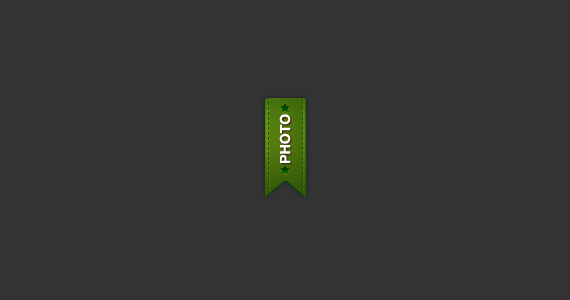
<style>
.page{position:relative;width:570px;height:300px;background:#333333}
.page>*{position:absolute;margin:0}
.t1{font:14px "HelveticaNeue-Bold";color:#ffffff;text-transform:uppercase}
</style>
<div class="page">
<p class="t1" style="left:279px;top:114px;width:12px;height:49px;rotate:-90deg">PHOTO</p>
</div>
